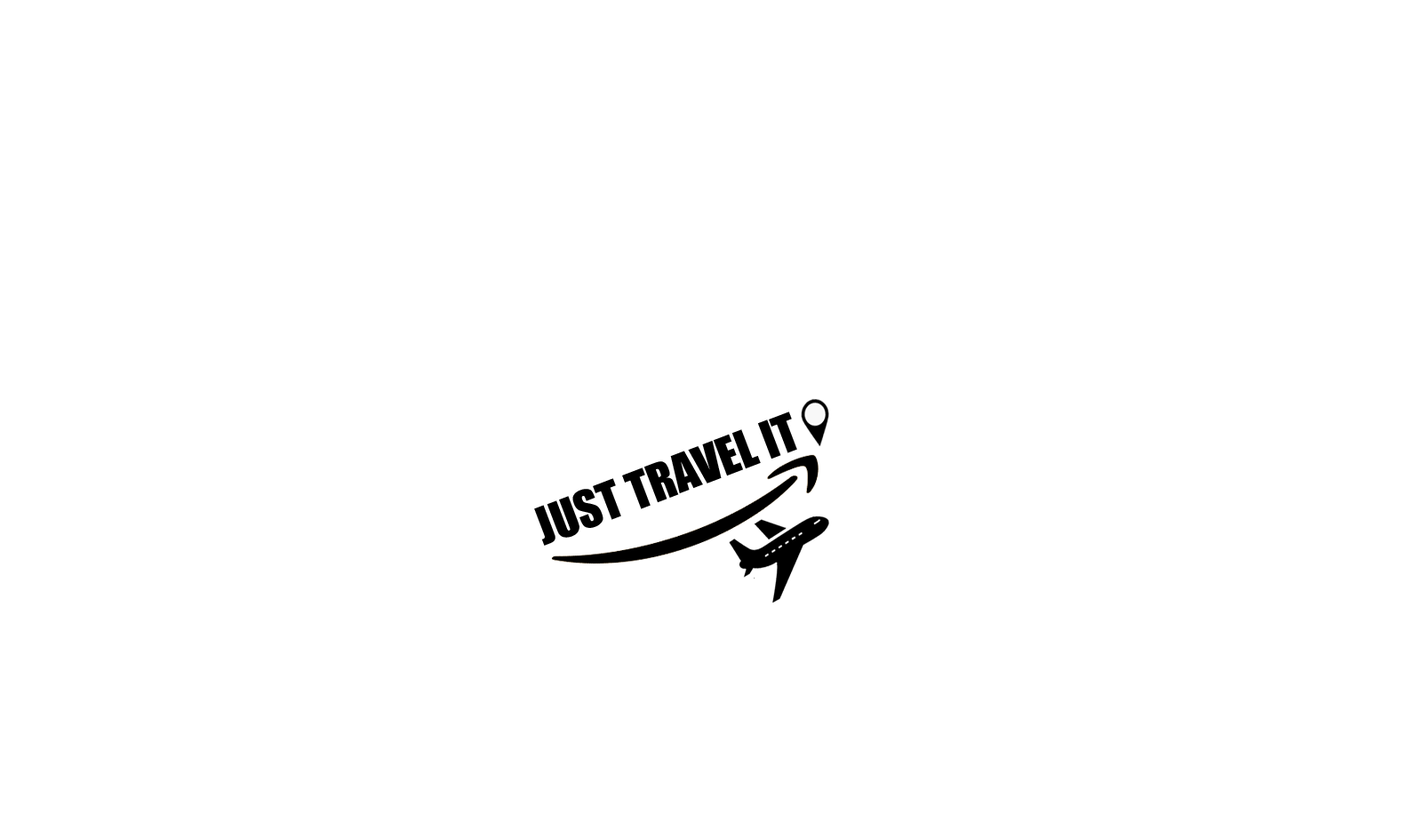
<style>
.page{position:relative;width:1422px;height:839px;background:#ffffff}
.page>*{position:absolute;margin:0}
.t1{font:48.1px "Impact";color:#000000}
</style>
<div class="page">
<p class="t1" style="left:534px;top:411px;width:263px;height:135px;rotate:-21deg">JUST TRAVEL IT</p>
</div>
